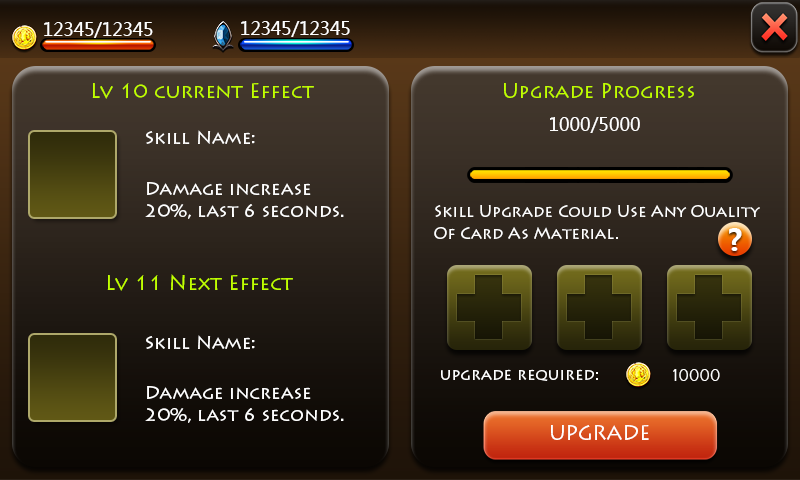
<style>
.page{position:relative;width:800px;height:480px}
.page>*{position:absolute;margin:0}
.t1{font:17.6px "MicrosoftYaHei";color:#ffffff}
.t2{font:20px "LithosPro-Regular";color:#c0ff00}
.t3{font:18px "MicrosoftYaHei";color:#ffffff}
.t4{font:18px "LithosPro-Regular";color:#ffffff}
.t5{font:18px/22px "LithosPro-Regular";color:#ffffff}
.t6{font:16px/22px "LithosPro-Regular";color:#ffffff}
.t7{font:16px "LithosPro-Regular";color:#ffffff}
.t8{font:18.1px "Vrinda";color:#ffffff}
.t9{font:20px "LithosPro-Regular";color:#ffffff}
</style>
<div class="page">
<p class="t1" style="left:44px;top:22px;width:109px;height:16px">12345/12345</p>
<p class="t1" style="left:241px;top:21px;width:109px;height:16px">12345/12345</p>
<p class="t2" style="left:92px;top:83px;width:222px;height:16px">Lv 10 current Effect</p>
<p class="t2" style="left:504px;top:83px;width:190px;height:15px">Upgrade Progress</p>
<p class="t3" style="left:550px;top:117px;width:90px;height:16px">1000/5000</p>
<p class="t4" style="left:146px;top:130px;width:109px;height:14px">Skill Name:</p>
<p class="t5" style="left:145px;top:182px;width:199px;height:37px">Damage increase<br>20%, last 6 seconds.</p>
<p class="t6" style="left:434px;top:205px;width:326px;height:34px">Skill Upgrade Could Use Any Ouality <br>Of Card As Material.</p>
<p class="t2" style="left:107px;top:274px;width:186px;height:17px">Lv 11 Next Effect</p>
<p class="t4" style="left:146px;top:335px;width:109px;height:14px">Skill Name:</p>
<p class="t7" style="left:441px;top:369px;width:157px;height:12px">upgrade required:</p>
<p class="t8" style="left:673px;top:369px;width:47px;height:12px">10000</p>
<p class="t5" style="left:145px;top:386px;width:199px;height:37px">Damage increase<br>20%, last 6 seconds.</p>
<p class="t9" style="left:551px;top:425px;width:98px;height:15px">UPGRADE</p>
</div>
